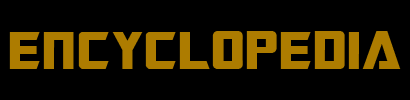
<style>
.page{position:relative;width:410px;height:100px;background:#000000}
.page>*{position:absolute;margin:0}
.t1{font:60px "TransformersMovie";letter-spacing:0.04em;color:#ad7c00}
.t2{font:60px "TransformersMovie";letter-spacing:0.06em;color:#ad7c00}
</style>
<div class="page">
<p class="t1" style="left:9px;top:31px;width:392px;height:38px">e<span class="t2">n</span>cyclopedia</p>
</div>
